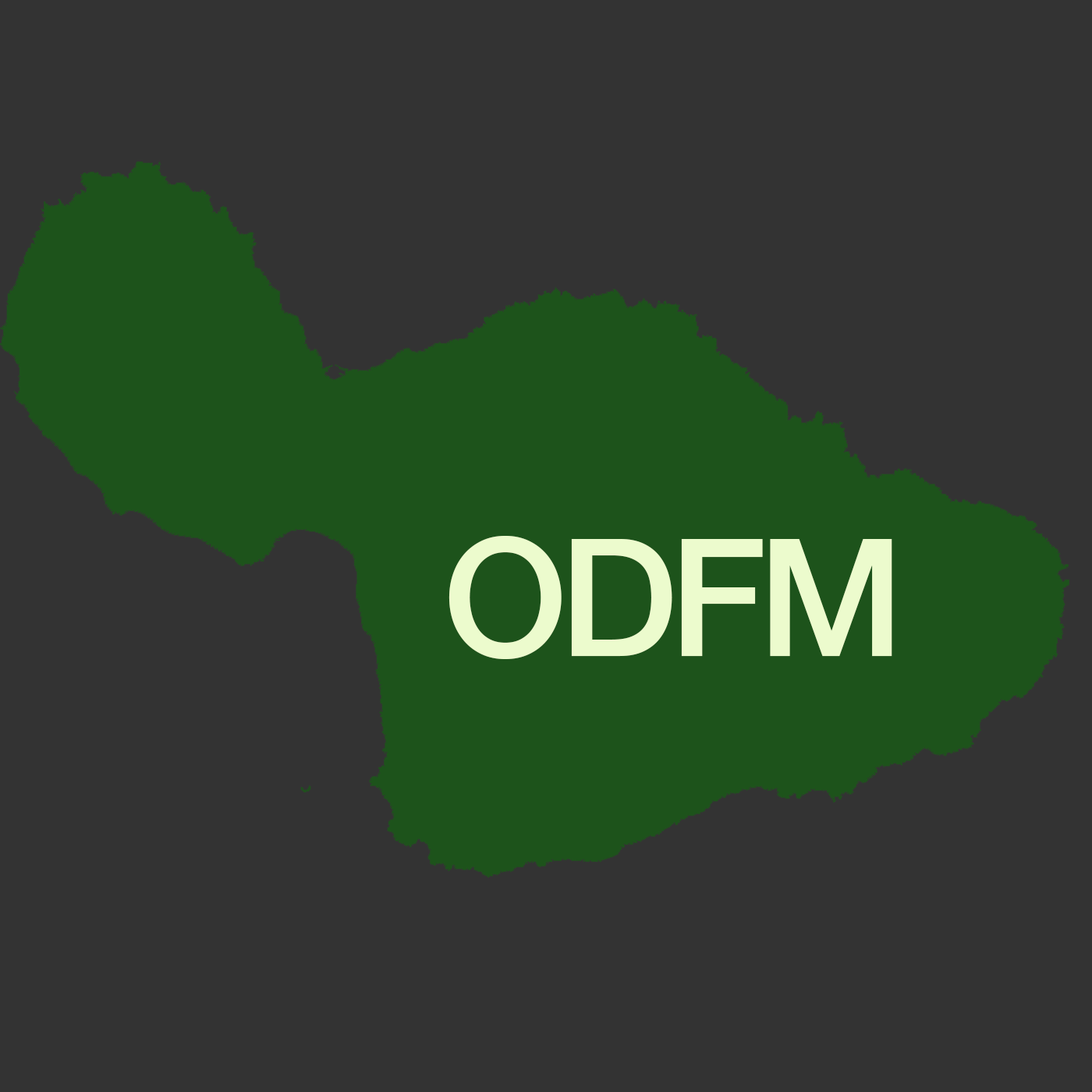
<style>
.page{position:relative;width:1092px;height:1092px;background:#333333}
.page>*{position:absolute;margin:0}
.t1{font:163.9px "HelveticaNeue-Medium";letter-spacing:-0.05em;color:#ecfbcd}
</style>
<div class="page">
<p class="t1" style="left:448px;top:536px;width:444px;height:123px">ODFM</p>
</div>
